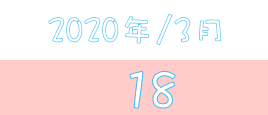
<style>
.page{position:relative;width:268px;height:115px;background:#ffffff}
.page>*{position:absolute;margin:0}
.t1{font:36px "DFWaWaH-W5-HK-BF"}
</style>
<div class="page">
<p class="t1" style="left:48px;top:13px;width:173px;height:33px">2020年/3月</p>
</div>
